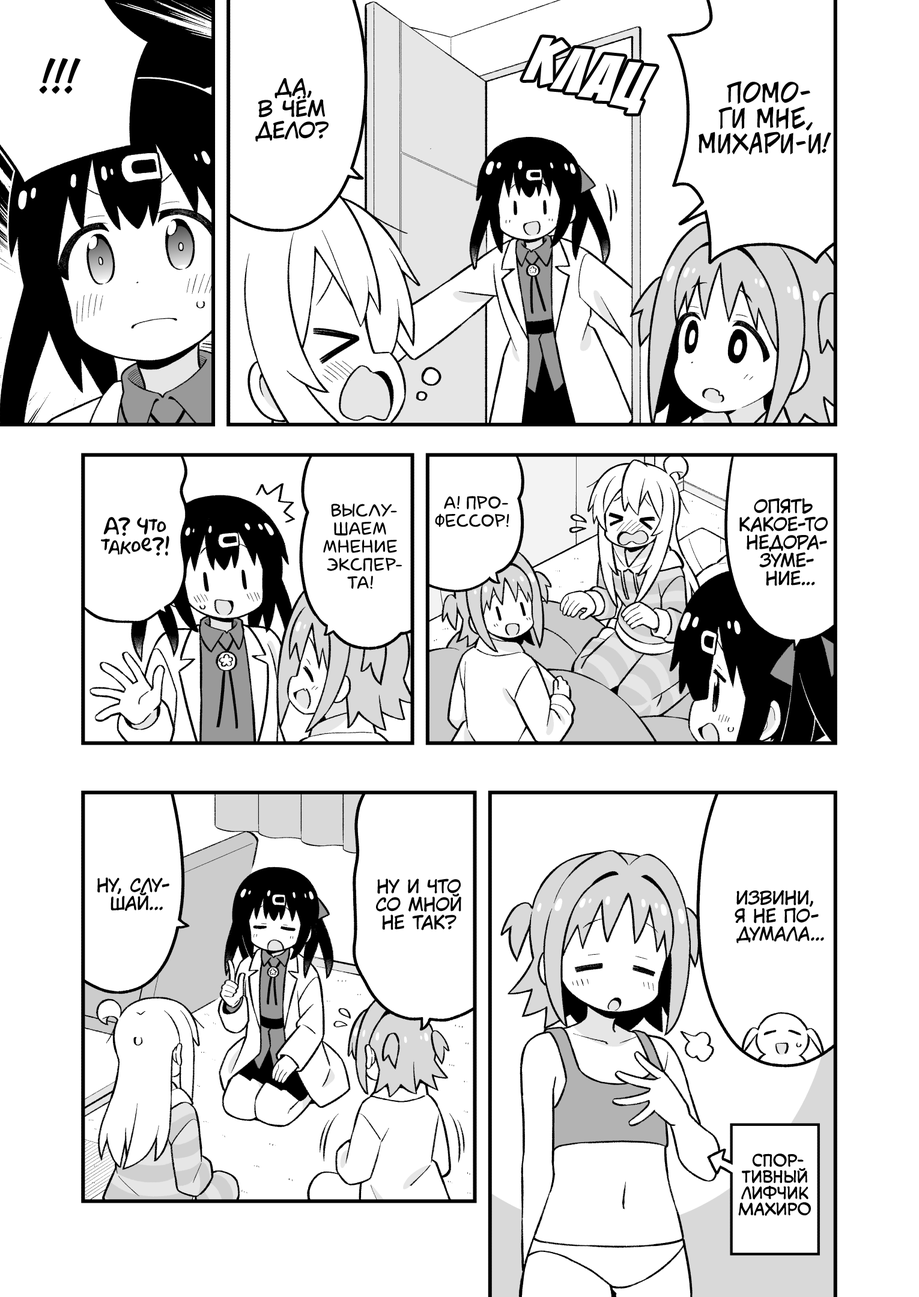
<style>
.page{position:relative;width:919px;height:1297px;background:#ffffff}
.page>*{position:absolute;margin:0}
.t1{font:72.1px "BadaBoom";color:#ffffff}
.t2{font:43.2px "v_CCJeffCampbell";color:#000000;text-transform:uppercase}
.t3{font:21.6px "KuraiVoice2";color:#000000;text-transform:uppercase}
.t4{font:25.2px "v_CCJeffCampbell";color:#000000;text-transform:uppercase}
.t5{font:18px "laCartoonerie";color:#000000;text-transform:uppercase}
.t6{font:18px "KuraiVoice2";color:#000000;text-transform:uppercase}
.t7{font:19.8px "AkbarPlain";color:#000000}
.t8{font:16.2px "v_CCMonologous";color:#000000;text-transform:uppercase}
</style>
<div class="page">
<p class="t1" style="left:523px;top:37px;width:134px;height:77px;rotate:15deg">клац</p>
<p class="t2" style="left:39px;top:58px;width:42px;height:36px">!!!</p>
<p class="t3" style="left:255px;top:78px;width:74px;height:64px;text-align:center">Да,<br>в чём<br>дело?</p>
<p class="t4" style="left:699px;top:81px;width:132px;height:74px;text-align:center">Помо-<br>ги мне,<br>Михари-и!</p>
<p class="t5" style="left:435px;top:496px;width:74px;height:31px;text-align:center">А! Про-<br>фессор!</p>
<p class="t6" style="left:739px;top:498px;width:89px;height:88px;text-align:center">Опять<br>какое-то<br>недора-<br>зуме-<br>ние...</p>
<p class="t5" style="left:323px;top:503px;width:79px;height:86px;text-align:center">Выслу-<br>шаем<br>мнение<br>экспер-<br>та!</p>
<p class="t7" style="left:101px;top:517px;width:68px;height:39px;text-align:center">А? Что<br>такое?!</p>
<p class="t6" style="left:97px;top:878px;width:72px;height:33px;text-align:center">Ну, слу-<br>шай...</p>
<p class="t6" style="left:376px;top:879px;width:85px;height:51px;text-align:center">Ну и что<br>со мной<br>не так?</p>
<p class="t6" style="left:735px;top:890px;width:89px;height:54px;text-align:center">Извини,<br>я не по-<br>думала...</p>
<p class="t8" style="left:738px;top:1154px;width:73px;height:62px;text-align:center">Спор-<br>тивный<br>лифчик<br>Махиро</p>
</div>
